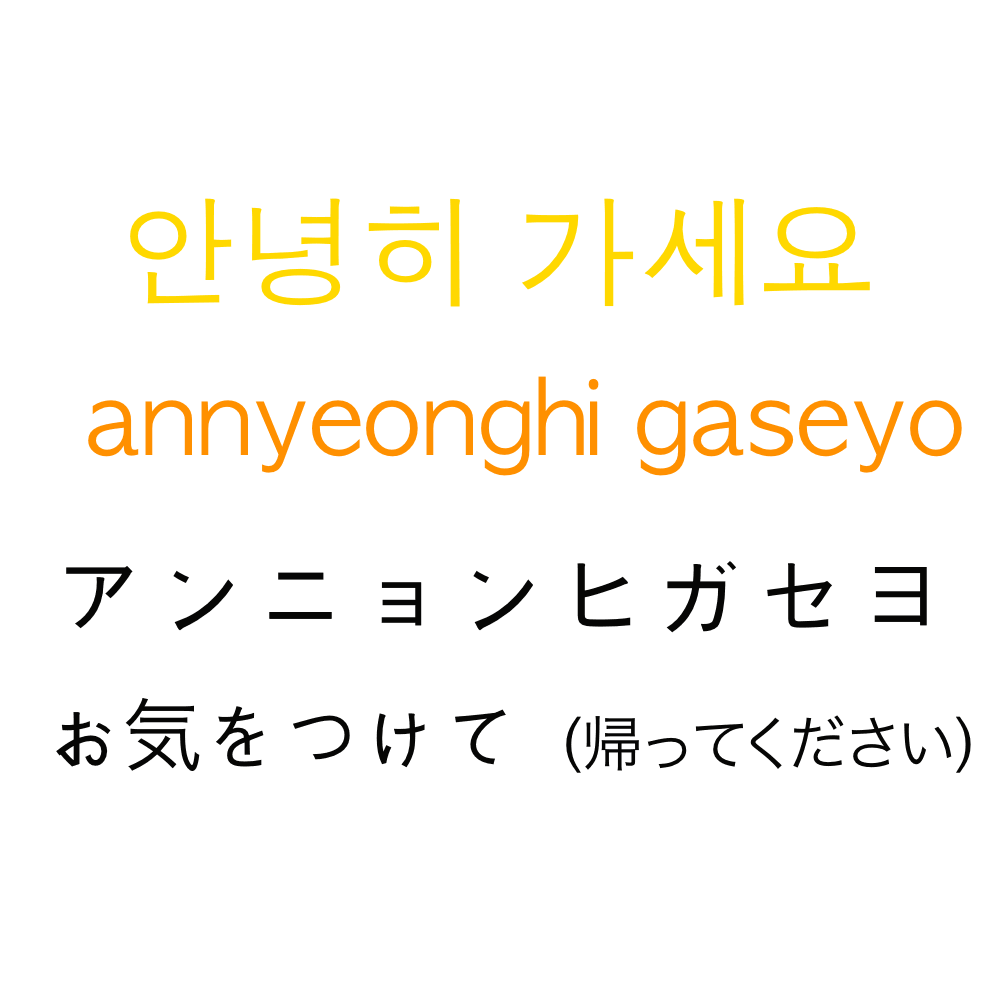
<style>
.page{position:relative;width:1000px;height:1000px;background:#ffffff}
.page>*{position:absolute;margin:0}
.t1{font:120px "AppleGothic";color:#ffd800}
.t2{font:100px "AppleGothic";color:#ff9000}
.t3{font:100px "AppleGothic";color:#060605}
.t4{font:60px "HiraKakuProN-W3";color:#060605}
.t5{font:80px "AppleGothic";color:#060605}
.t6{font:80px "HiraKakuProN-W3";color:#060605}
.t7{font:60px "AppleGothic";color:#060605}
</style>
<div class="page">
<p class="t1" style="left:130px;top:198px;width:740px;height:109px">안녕히 가세요</p>
<p class="t2" style="left:88px;top:376px;width:874px;height:100px">annyeonghi gaseyo</p>
<p class="t3" style="left:66px;top:561px;width:861px;height:72px">アンニョンヒガセヨ</p>
<p class="t4" style="left:56px;top:698px;width:915px;height:75px"><span class="t5">お</span><span class="t6">気</span><span class="t5">をつけて</span><span class="t7">（</span>帰ってください<span class="t7">）</span></p>
</div>
